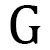
<style>
.page{position:relative;width:50px;height:50px;background:#ffffff}
.page>*{position:absolute;margin:0}
.t1{font:58.3px "CambriaMath";color:#000000}
</style>
<div class="page">
<p class="t1" style="left:10px;top:5px;width:31px;height:39px">G</p>
</div>
